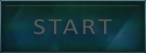
<style>
.page{position:relative;width:146px;height:53px}
.page>*{position:absolute;margin:0}
.t1{font:23px "Calibri";letter-spacing:0.1em;color:#565757;scale:1.2 1}
</style>
<div class="page">
<p class="t1" style="left:34px;top:19px;width:78px;height:16px">START</p>
</div>
